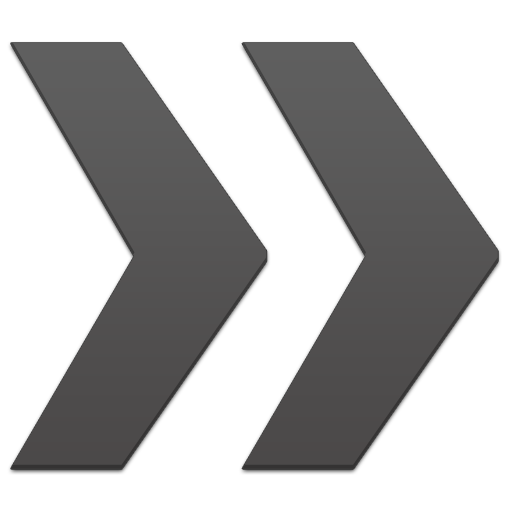
<style>
.page{position:relative;width:512px;height:512px;background:#ffffff}
.page>*{position:absolute;margin:0}
.t1{font:1090px "Roboto-Black";color:#555454}
</style>
<div class="page">
<p class="t1" style="left:11px;top:43px;width:487px;height:426px">»</p>
</div>
